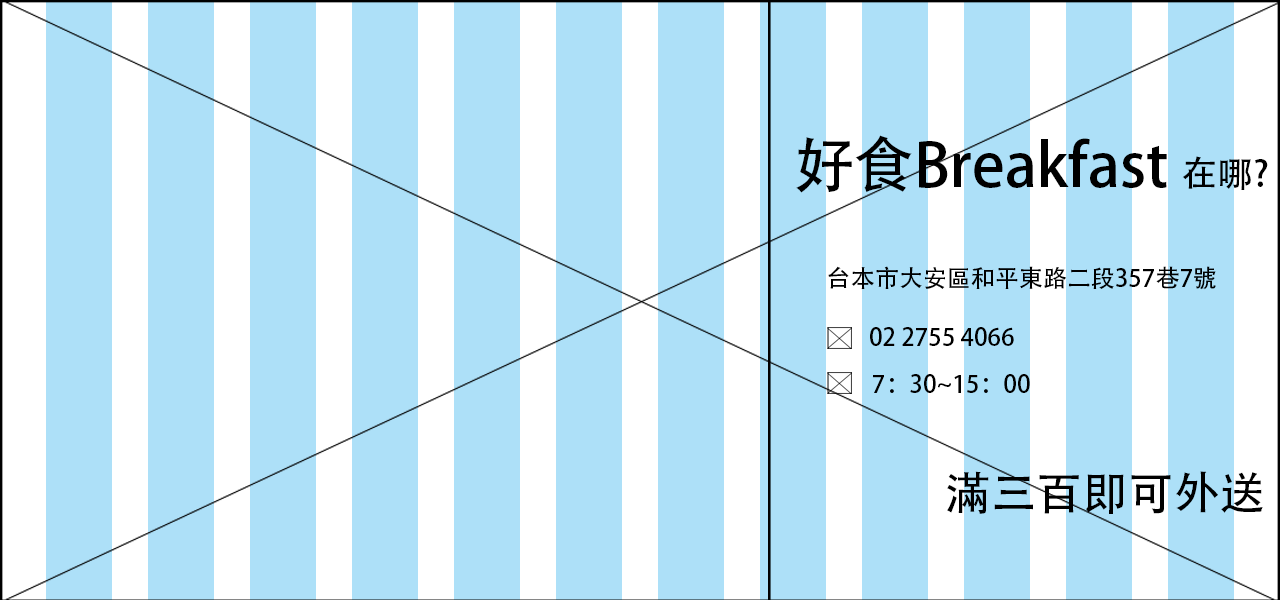
<style>
.page{position:relative;width:1280px;height:600px;background:#ade0f8}
.page>*{position:absolute;margin:0}
.t1{font:60px "AdobeHeitiStd-Regular";color:#000000}
.t2{font:36px "AdobeHeitiStd-Regular";color:#000000}
.t3{font:24px "AdobeHeitiStd-Regular";color:#000000}
.t4{font:24px/48px "AdobeHeitiStd-Regular";color:#000000}
.t5{font:45.6px "AdobeHeitiStd-Regular";color:#000000}
</style>
<div class="page">
<p class="t1" style="left:796px;top:135px;width:472px;height:58px">好食Breakfast <span class="t2">在哪?</span></p>
<p class="t3" style="left:828px;top:266px;width:388px;height:24px">台本市大安區和平東路二段357巷7號</p>
<p class="t3" style="left:870px;top:327px;width:144px;height:19px">02 2755 4066</p>
<p class="t4" style="left:873px;top:374px;width:157px;height:19px">7：30~15：00<br>7:30 - 15:00</p>
<p class="t5" style="left:947px;top:471px;width:316px;height:43px">滿三百即可外送</p>
</div>
